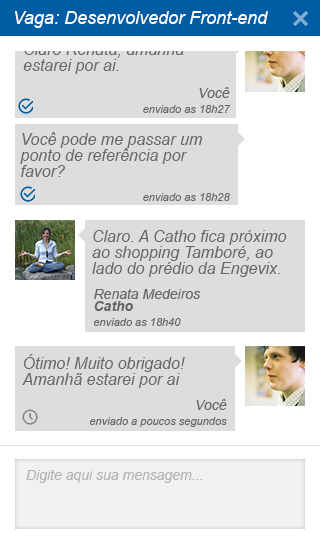
<style>
.page{position:relative;width:320px;height:545px;background:#dddddd}
.page>*{position:absolute;margin:0}
.t1{font:18px "Arial-ItalicMT";color:#ffffff}
.t2{font:16px/16px "Arial-ItalicMT";color:#666666}
.t3{font:14px "Arial-ItalicMT";color:#666666}
.t4{font:11px "Arial-ItalicMT";color:#666666}
.t5{font:14px/12px "Arial-ItalicMT";color:#666666}
.t6{font:14px/12px "Arial-BoldItalicMT";color:#666666}
.t7{font:14px "Arial-ItalicMT";color:#b3b3b3}
</style>
<div class="page">
<p class="t1" style="left:15px;top:11px;width:253px;height:17px">Vaga: Desenvolvedor Front-end</p>
<p class="t2" style="left:23px;top:43px;width:161px;height:31px">Claro Renata, amanhã estarei por ai.</p>
<p class="t3" style="left:199px;top:87px;width:31px;height:11px">Você</p>
<p class="t4" style="left:143px;top:105px;width:88px;height:8px">enviado as 18h27</p>
<p class="t2" style="left:20px;top:132px;width:183px;height:45px">Você pode me passar um ponto de referência por favor?</p>
<p class="t4" style="left:143px;top:193px;width:87px;height:8px">enviado as 18h28</p>
<p class="t2" style="left:92px;top:230px;width:195px;height:47px">Claro. A Catho fica próximo ao shopping Tamboré, ao lado do prédio da Engevix.</p>
<p class="t5" style="left:94px;top:289px;width:107px;height:22px">Renata Medeiros<br><span class="t6">Catho</span></p>
<p class="t4" style="left:94px;top:318px;width:87px;height:8px">enviado as 18h40</p>
<p class="t2" style="left:22px;top:354px;width:163px;height:34px">Ótimo! Muito obrigado! Amanhã estarei por ai</p>
<p class="t3" style="left:196px;top:399px;width:31px;height:11px">Você</p>
<p class="t4" style="left:90px;top:417px;width:137px;height:10px">enviado a poucos segundos</p>
<p class="t7" style="left:26px;top:470px;width:176px;height:13px">Digite aqui sua mensagem...</p>
<p class="t7" style="left:26px;top:470px;width:176px;height:13px">Digite aqui sua mensagem...</p>
</div>
